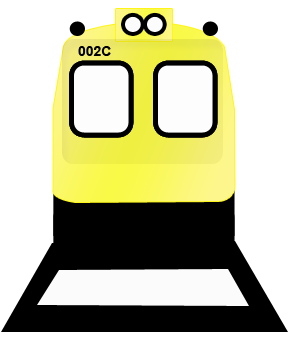
<style>
.page{position:relative;width:288px;height:341px;background:#ffffff}
.page>*{position:absolute;margin:0}
.t1{font:14px "Arial-BoldMT";color:#010101}
</style>
<div class="page">
<p class="t1" style="left:78px;top:46px;width:33px;height:10px">002C</p>
</div>
